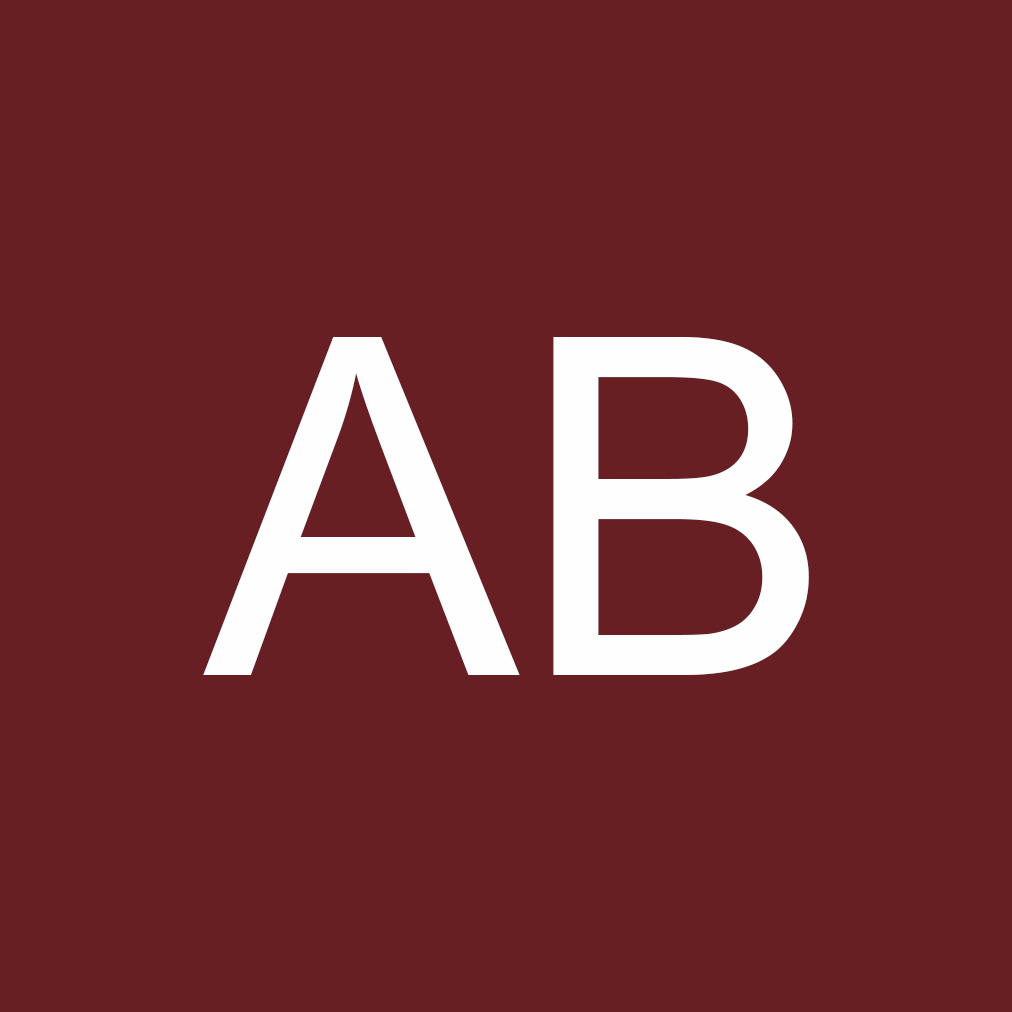
<style>
.page{position:relative;width:1012px;height:1012px;background:#671f24}
.page>*{position:absolute;margin:0}
.t1{font:472px "ArialMT";color:#fefefe}
</style>
<div class="page">
<p class="t1" style="left:203px;top:337px;width:606px;height:338px">AB</p>
</div>
